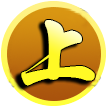
<style>
.page{position:relative;width:108px;height:108px;background:#ffffff}
.page>*{position:absolute;margin:0}
.t1{font:99px "STXingkai"}
</style>
<div class="page">
<p class="t1" style="left:21px;top:20px;width:74px;height:66px">上</p>
</div>
